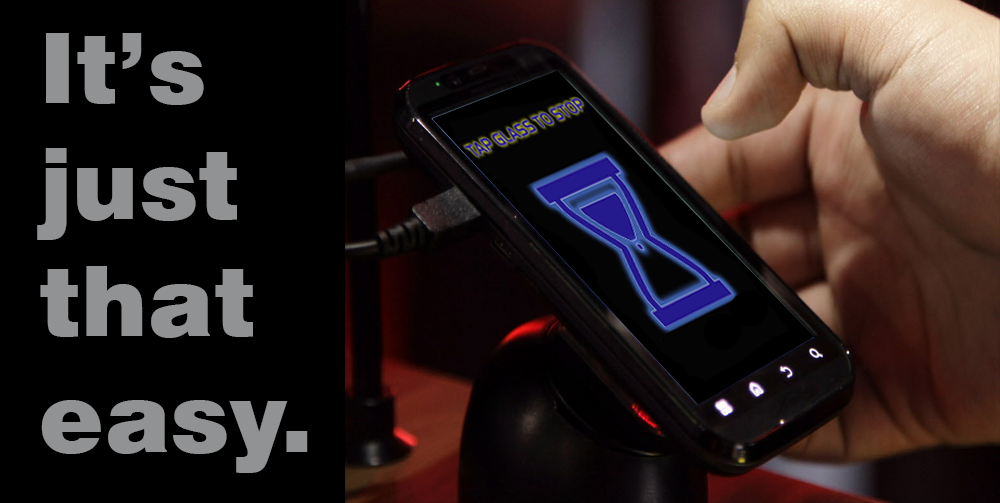
<style>
.page{position:relative;width:1000px;height:503px;background:#000000}
.page>*{position:absolute;margin:0}
.t1{font:97px "Swiss721BT-Black";color:#909293}
</style>
<div class="page">
<p class="t1" style="left:37px;top:33px;width:271px;height:440px">It’s<br>just<br>that <br>easy.</p>
</div>
